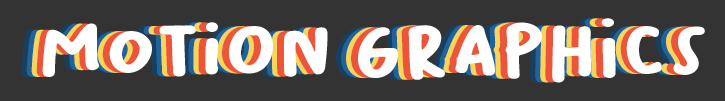
<style>
.page{position:relative;width:725px;height:101px;background:#333333}
.page>*{position:absolute;margin:0}
.t1{font:75px "BaksoSapi";color:#ffffff}
</style>
<div class="page">
<p class="t1" style="left:42px;top:18px;width:663px;height:65px">Motion Graphics</p>
</div>
